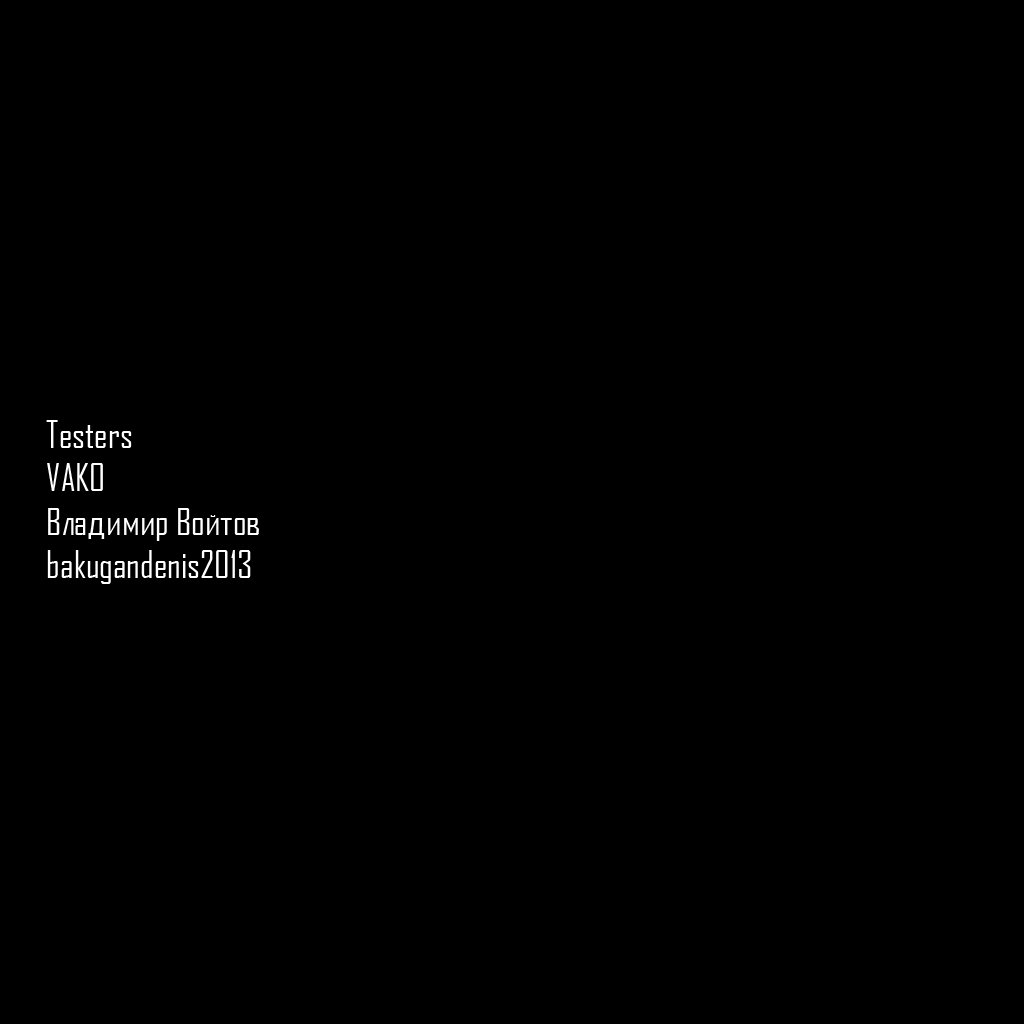
<style>
.page{position:relative;width:1024px;height:1024px;background:#000000}
.page>*{position:absolute;margin:0}
.t1{font:36px "AgencyFBCyrillic";color:#ffffff}
</style>
<div class="page">
<p class="t1" style="left:46px;top:420px;width:213px;height:164px">Testers<br>VAKO<br>Владимир Войтов<br>bakugandenis2013</p>
</div>
